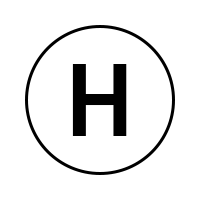
<style>
.page{position:relative;width:200px;height:200px;background:#ffffff}
.page>*{position:absolute;margin:0}
.t1{font:108px "FranklinGothic-Medium";color:#000000}
</style>
<div class="page">
<p class="t1" style="left:72px;top:64px;width:55px;height:72px">H</p>
</div>
